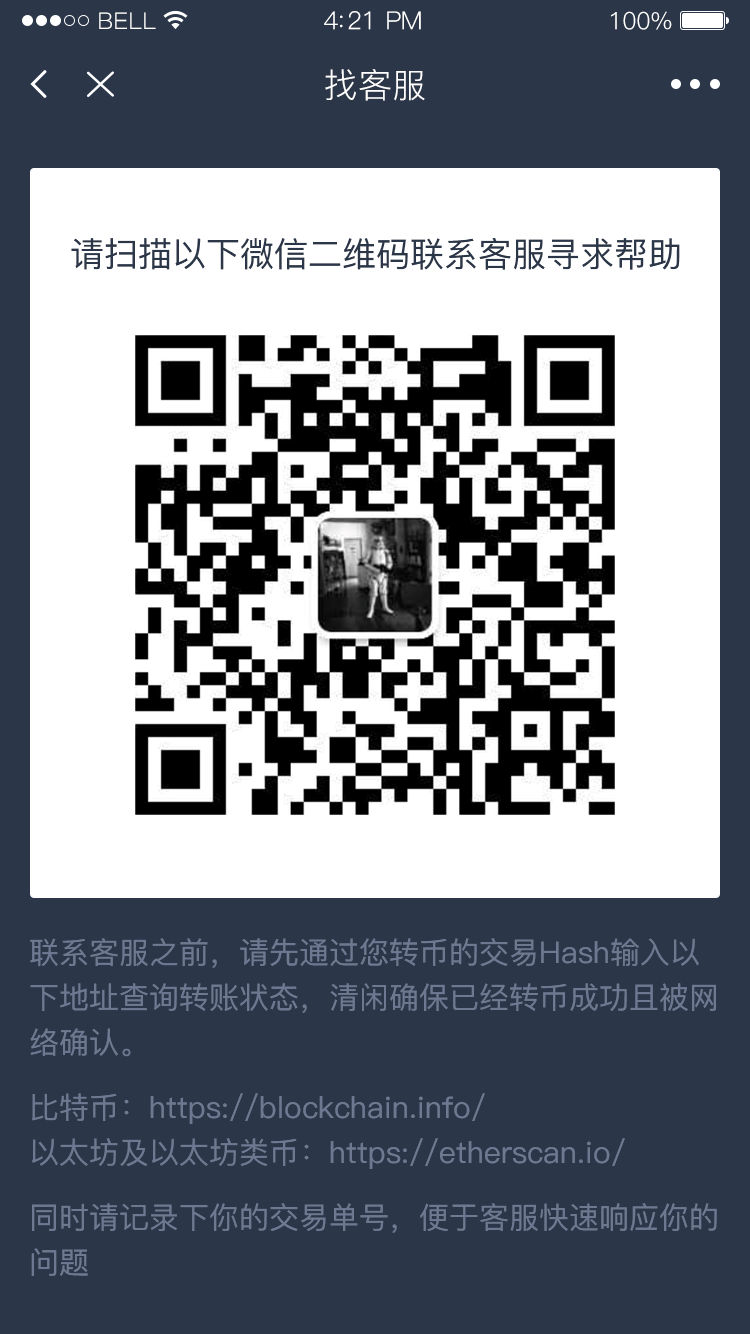
<style>
.page{position:relative;width:750px;height:1334px;background:#2b3749}
.page>*{position:absolute;margin:0}
.t1{font:23px "PingFang-SC-Regular";letter-spacing:0.02em;color:#ffffff}
.t2{font:25px "PingFang-SC-Regular";letter-spacing:-0.02em;color:#ffffff}
.t3{font:24px "PingFang-SC-Regular";letter-spacing:-0.02em;color:#ffffff}
.t4{font:34px "PingFang-SC-Regular";color:#ffffff}
.t5{font:34px "PingFang-SC-Medium";color:#2b3749}
.t6{font:30px/45px "PingFang-SC-Medium";color:#6e7991}
.t7{font:30px/65px "PingFang-SC-Medium";color:#6e7991}
</style>
<div class="page">
<p class="t1" style="left:99px;top:12px;width:57px;height:17px">BELL</p>
<p class="t2" style="left:324px;top:11px;width:97px;height:19px">4:21 PM</p>
<p class="t3" style="left:611px;top:11px;width:61px;height:19px">100%</p>
<p class="t4" style="left:325px;top:69px;width:100px;height:32px">找客服</p>
<p class="t5" style="left:71px;top:238px;width:609px;height:32px">请扫描以下微信二维码联系客服寻求帮助</p>
<p class="t6" style="left:30px;top:938px;width:687px;height:338px">联系客服之前，请先通过您转币的交易Hash输入以<br>下地址查询转账状态，清闲确保已经转币成功且被网<br>络确认。<br><span class="t7">比</span>特币：https://blockchain.info/<br>以太坊及以太坊类币：https://etherscan.io/<br><span class="t7">同</span>时请记录下你的交易单号，便于客服快速响应你的<br>问题</p>
</div>
